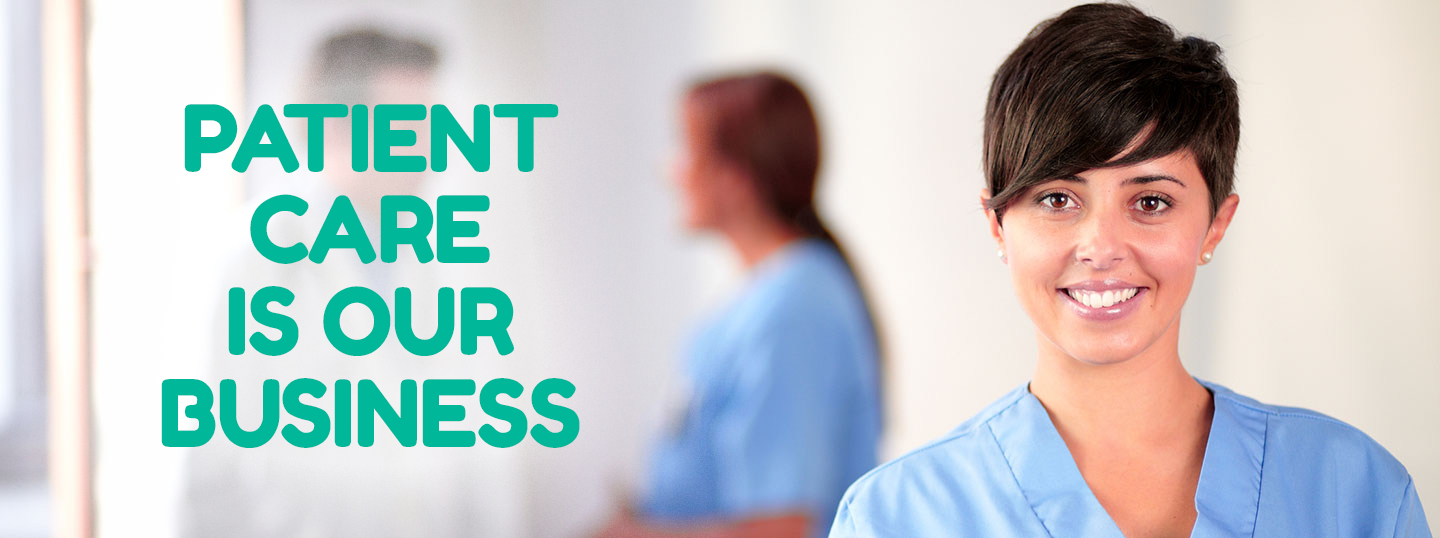
<style>
.page{position:relative;width:1440px;height:538px}
.page>*{position:absolute;margin:0}
.t1{font:92.5px/91.8px "FredokaOne-Regular";letter-spacing:-0.018em;color:#00b79a;text-transform:uppercase}
</style>
<div class="page">
<p class="t1" style="left:161px;top:104px;width:419px;height:344px;text-align:center">Patient<br>Care<br>is Our<br>Business</p>
</div>
